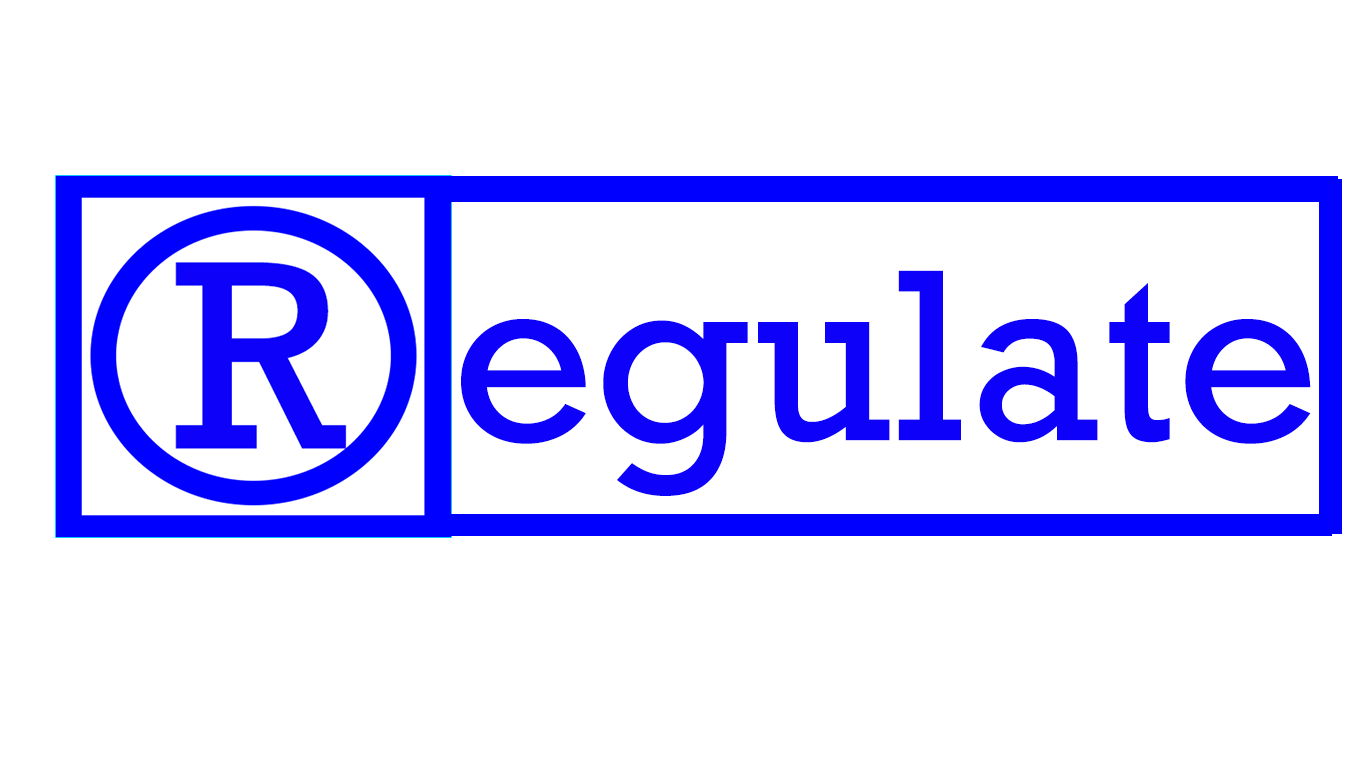
<style>
.page{position:relative;width:1366px;height:768px;background:#ffffff}
.page>*{position:absolute;margin:0}
.t1{font:230px "Rockwell-Regular";color:#0d01f9}
</style>
<div class="page">
<p class="t1" style="left:461px;top:270px;width:850px;height:226px">egulate</p>
</div>
